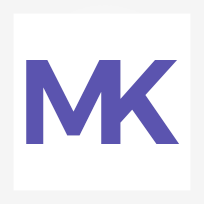
<style>
.page{position:relative;width:204px;height:204px;background:#ffffff}
.page>*{position:absolute;margin:0}
.t1{font:120px "Montserrat-SemiBold";letter-spacing:-0.315em;color:#5b54af}
</style>
<div class="page">
<p class="t1" style="left:26px;top:60px;width:154px;height:84px">MK</p>
</div>
